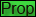
<style>
.page{position:relative;width:36px;height:17px}
.page>*{position:absolute;margin:0}
.t1{font:16px "Helvetica";color:#110d05}
</style>
<div class="page">
<p class="t1" style="left:2px;top:2px;width:32px;height:15px">Prop</p>
</div>
